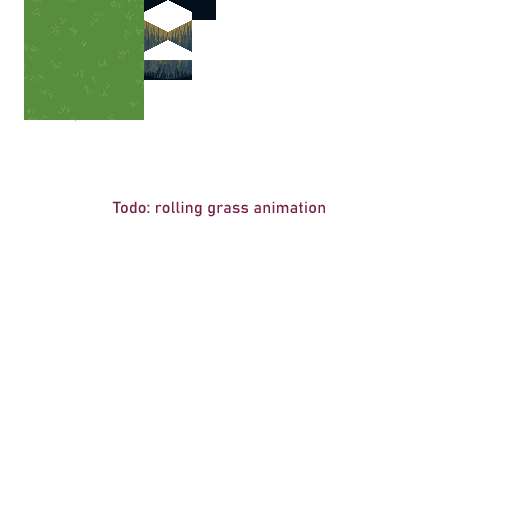
<style>
.page{position:relative;width:512px;height:512px;background:#ffffff}
.page>*{position:absolute;margin:0}
.t1{font:16px "Bahnschrift";letter-spacing:0.015em;color:#77204a}
</style>
<div class="page">
<p class="t1" style="left:112px;top:201px;width:213px;height:16px">Todo: rolling grass animation</p>
</div>
